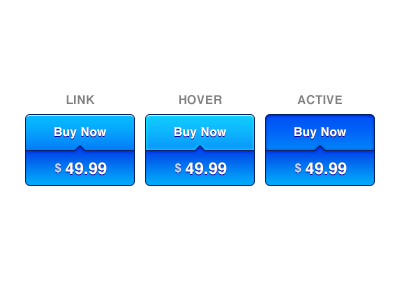
<style>
.page{position:relative;width:400px;height:300px;background:#ffffff}
.page>*{position:absolute;margin:0}
.t1{font:12px "Helvetica-Bold";letter-spacing:0.02em;color:#818181}
.t2{font:12px "Helvetica-Bold";letter-spacing:0.02em;color:#ffffff}
.t3{font:12px "Helvetica-Bold";letter-spacing:0.02em;color:#cbdefb}
.t4{font:16px "Helvetica-Bold";letter-spacing:0.02em;color:#ffffff}
</style>
<div class="page">
<p class="t1" style="left:66px;top:95px;width:29px;height:9px">LINK</p>
<p class="t1" style="left:179px;top:95px;width:43px;height:10px">HOVER</p>
<p class="t1" style="left:297px;top:95px;width:45px;height:10px">ACTIVE</p>
<p class="t2" style="left:54px;top:127px;width:53px;height:12px">Buy Now</p>
<p class="t2" style="left:174px;top:127px;width:53px;height:12px">Buy Now</p>
<p class="t2" style="left:294px;top:127px;width:53px;height:12px">Buy Now</p>
<p class="t3" style="left:55px;top:162px;width:6px;height:12px">$</p>
<p class="t4" style="left:65px;top:162px;width:42px;height:13px">49.99</p>
<p class="t3" style="left:175px;top:162px;width:6px;height:12px">$</p>
<p class="t4" style="left:185px;top:162px;width:42px;height:13px">49.99</p>
<p class="t3" style="left:295px;top:162px;width:6px;height:12px">$</p>
<p class="t4" style="left:305px;top:162px;width:42px;height:13px">49.99</p>
</div>
